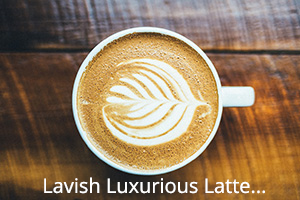
<style>
.page{position:relative;width:300px;height:200px}
.page>*{position:absolute;margin:0}
.t1{font:20px "OpenSans-Regular";color:#ffffff}
</style>
<div class="page">
<p class="t1" style="left:44px;top:177px;width:221px;height:17px">Lavish Luxurious Latte...</p>
</div>
